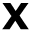
<style>
.page{position:relative;width:32px;height:32px;background:#ffffff}
.page>*{position:absolute;margin:0}
.t1{font:36px "Verdana-Bold";color:#000000}
</style>
<div class="page">
<p class="t1" style="left:2px;top:3px;width:27px;height:27px">X</p>
</div>
